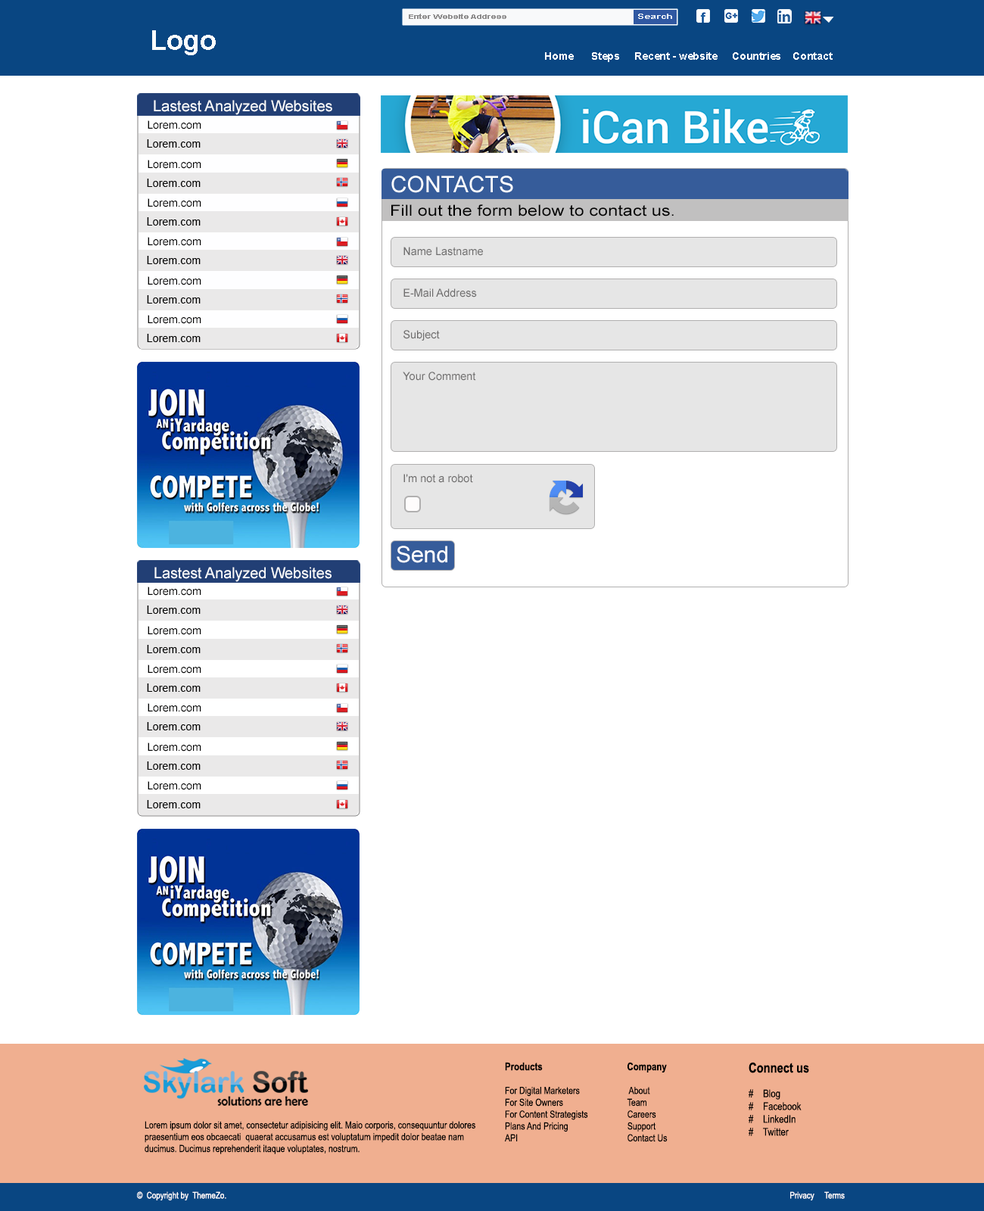
<style>
.page{position:relative;width:984px;height:1211px;background:#ffffff}
.page>*{position:absolute;margin:0}
.t1{font:6px "Arial-BoldMT";color:#8d8c8c;scale:1.52 1}
.t2{font:6.5px "Arial-BoldMT";color:#f7f9fa;scale:1.64 1}
.t3{font:27.3px "Arial-BoldMT";color:#fcfdfd}
.t4{font:10.5px "Arial-BoldMT";color:#fcfdfd}
.t5{font:15.1px "ArialMT";color:#fcfeff}
.t6{font:11px "ArialMT";color:#000000}
.t7{font:11.1px "ArialMT";color:#000000}
.t8{font:22.7px "ArialMT";color:#fcfeff}
.t9{font:15.1px "ArialMT";color:#000000;scale:1.18 1}
.t10{font:11px "ArialMT";color:#6f6e6e}
.t11{font:22.7px "ArialMT";color:#ffffff}
.t12{font:9.9px "ArialNarrow";color:#000000}
.t13{font:10.6px "ArialNarrow-Bold";color:#000000}
.t14{font:10.7px "ArialNarrow";color:#000000}
.t15{font:13.7px "ArialNarrow-Bold";color:#000000}
.t16{font:9.8px "ArialNarrow";color:#010101}
.t17{font:9.1px "ArialNarrow";color:#ffffff}
</style>
<div class="page">
<p class="t1" style="left:409px;top:14px;width:98px;height:5px">Enter Website Address</p>
<p class="t2" style="left:638px;top:14px;width:34px;height:5px">Search</p>
<p class="t3" style="left:152px;top:30px;width:64px;height:25px">Logo</p>
<p class="t4" style="left:545px;top:52px;width:288px;height:10px">Home      Steps     Recent - website     Countries    Contact</p>
<p class="t5" style="left:154px;top:100px;width:178px;height:15px">Lastest Analyzed Websites</p>
<p class="t6" style="left:148px;top:120px;width:53px;height:9px">Lorem.com</p>
<p class="t6" style="left:147px;top:139px;width:54px;height:9px">Lorem.com</p>
<p class="t7" style="left:148px;top:160px;width:53px;height:9px">Lorem.com</p>
<p class="t7" style="left:147px;top:179px;width:54px;height:8px">Lorem.com</p>
<p class="t8" style="left:391px;top:176px;width:122px;height:17px">CONTACTS</p>
<p class="t7" style="left:148px;top:198px;width:53px;height:9px">Lorem.com</p>
<p class="t9" style="left:391px;top:204px;width:283px;height:13px">Fill out the form below to contact us.</p>
<p class="t7" style="left:147px;top:217px;width:54px;height:9px">Lorem.com</p>
<p class="t6" style="left:148px;top:237px;width:53px;height:9px">Lorem.com</p>
<p class="t6" style="left:147px;top:256px;width:54px;height:8px">Lorem.com</p>
<p class="t10" style="left:404px;top:247px;width:79px;height:9px">Name Lastname</p>
<p class="t7" style="left:148px;top:276px;width:53px;height:9px">Lorem.com</p>
<p class="t10" style="left:404px;top:288px;width:73px;height:10px">E-Mail Address</p>
<p class="t7" style="left:147px;top:295px;width:54px;height:9px">Lorem.com</p>
<p class="t7" style="left:148px;top:315px;width:53px;height:9px">Lorem.com</p>
<p class="t7" style="left:147px;top:334px;width:54px;height:8px">Lorem.com</p>
<p class="t10" style="left:404px;top:330px;width:36px;height:11px">Subject</p>
<p class="t10" style="left:403px;top:372px;width:73px;height:9px">Your Comment</p>
<p class="t10" style="left:404px;top:474px;width:69px;height:9px">I'm not a robot</p>
<p class="t11" style="left:397px;top:546px;width:50px;height:17px">Send</p>
<p class="t5" style="left:154px;top:567px;width:178px;height:15px">Lastest Analyzed Websites</p>
<p class="t6" style="left:148px;top:587px;width:53px;height:9px">Lorem.com</p>
<p class="t6" style="left:147px;top:606px;width:54px;height:8px">Lorem.com</p>
<p class="t7" style="left:148px;top:626px;width:53px;height:9px">Lorem.com</p>
<p class="t7" style="left:147px;top:645px;width:54px;height:8px">Lorem.com</p>
<p class="t7" style="left:148px;top:665px;width:53px;height:9px">Lorem.com</p>
<p class="t7" style="left:147px;top:684px;width:54px;height:8px">Lorem.com</p>
<p class="t6" style="left:148px;top:703px;width:53px;height:9px">Lorem.com</p>
<p class="t6" style="left:147px;top:722px;width:54px;height:9px">Lorem.com</p>
<p class="t7" style="left:148px;top:743px;width:53px;height:9px">Lorem.com</p>
<p class="t7" style="left:147px;top:762px;width:54px;height:8px">Lorem.com</p>
<p class="t7" style="left:148px;top:781px;width:53px;height:9px">Lorem.com</p>
<p class="t7" style="left:147px;top:800px;width:54px;height:9px">Lorem.com</p>
<p class="t12" style="left:504px;top:1062px;width:164px;height:81px"><span class="t13">Products                                   Company<br></span><br>For Digital Marketers                      About<br>For Site Owners        Team<br>For Content Strategists       Careers<br>Plans And Pricing        Support<br>API          Contact Us</p>
<p class="t14" style="left:749px;top:1062px;width:60px;height:74px"><span class="t15">Connect us<br><br></span>#    Blog<br>#    Facebook<br>#    LinkedIn<br>#    Twitter</p>
<p class="t16" style="left:145px;top:1121px;width:330px;height:34px">Lorem ipsum dolor sit amet, consectetur adipisicing elit. Maio corporis, consequuntur dolores <br>praesentium eos obcaecati  quaerat accusamus est voluptatum impedit dolor beatae nam <br>ducimus. Ducimus reprehenderit itaque voluptates, nostrum.</p>
<p class="t17" style="left:137px;top:1192px;width:708px;height:9px">©  Copyright by  ThemeZo.                                                                                                                                                                                                                                                                                Privacy     Terms</p>
</div>
